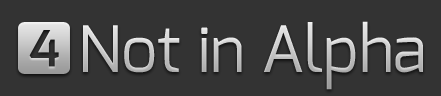
<style>
.page{position:relative;width:441px;height:96px;background:#333333}
.page>*{position:absolute;margin:0}
.t1{font:64px "Exo-Regular"}
</style>
<div class="page">
<p class="t1" style="left:83px;top:21px;width:340px;height:69px">Not in Alpha</p>
</div>
